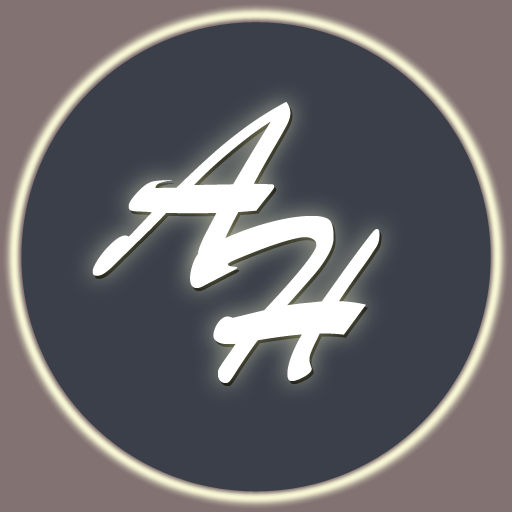
<style>
.page{position:relative;width:512px;height:512px;background:#3a3f4a}
.page>*{position:absolute;margin:0}
.t1{font:250px "BrushScriptMT";color:#ffffff}
</style>
<div class="page">
<p class="t1" style="left:92px;top:102px;width:199px;height:174px">A</p>
<p class="t1" style="left:190px;top:216px;width:190px;height:167px">H</p>
</div>
